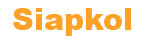
<style>
.page{position:relative;width:150px;height:40px;background:#ffffff}
.page>*{position:absolute;margin:0}
.t1{font:30px "Arial-Black";color:#ffa126}
</style>
<div class="page">
<p class="t1" style="left:13px;top:8px;width:118px;height:28px">Siapkol</p>
</div>
